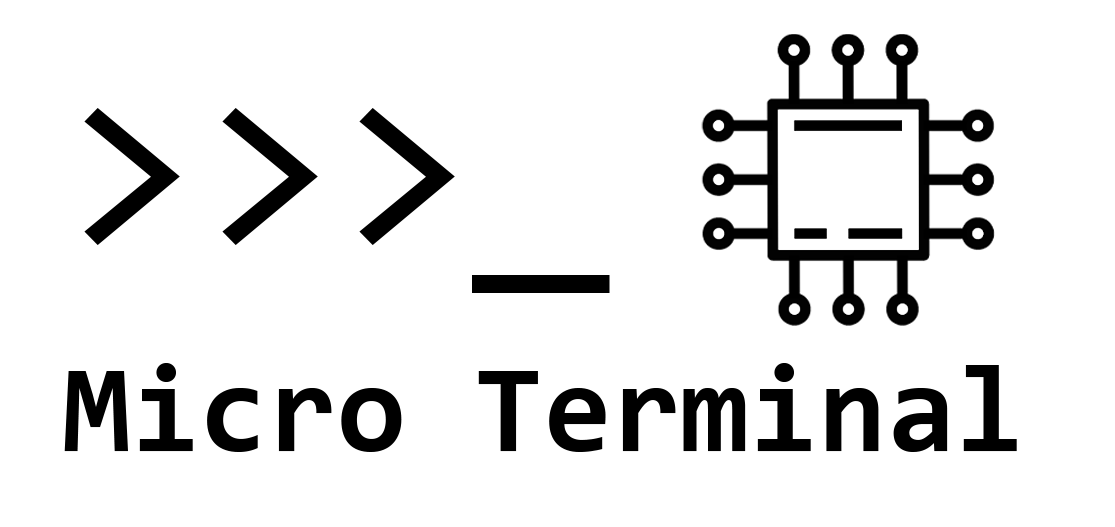
<style>
.page{position:relative;width:1115px;height:527px;background:#ffffff}
.page>*{position:absolute;margin:0}
.t1{font:250px "Consolas";color:#000000}
.t2{font:125px "Consolas-Bold";color:#000000}
</style>
<div class="page">
<p class="t1" style="left:84px;top:108px;width:526px;height:185px">&gt;&gt;&gt;_</p>
<p class="t2" style="left:64px;top:363px;width:953px;height:89px">Micro Terminal</p>
</div>
